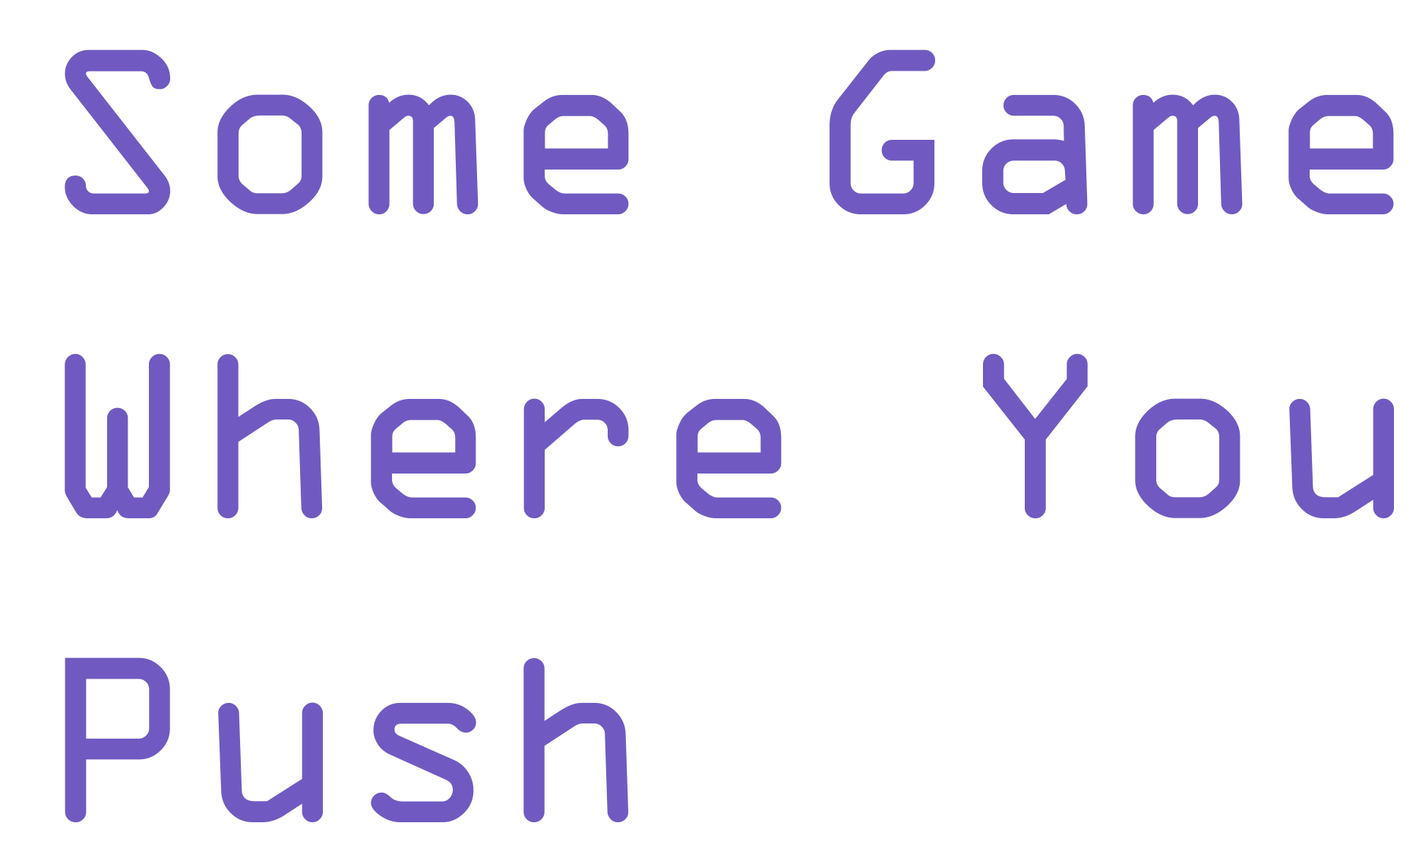
<style>
.page{position:relative;width:1416px;height:842px;background:#ffffff}
.page>*{position:absolute;margin:0}
.t1{font:253.3px "OCRAExtended";color:#705ac1}
</style>
<div class="page">
<p class="t1" style="left:65px;top:49px;width:1329px;height:773px">Some Game Where You Push</p>
</div>
